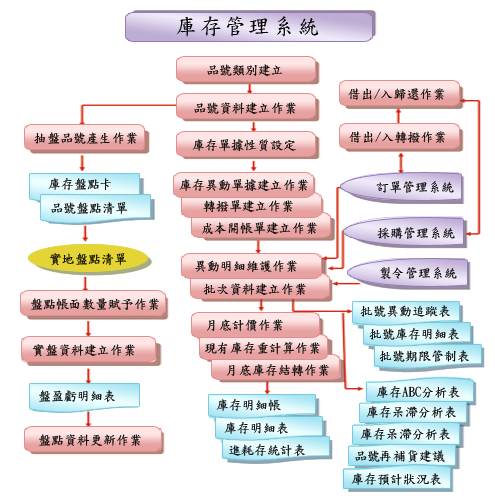
<style>
.page{position:relative;width:495px;height:500px;background:#ffffff}
.page>*{position:absolute;margin:0}
.t1{font:22px "DFKaiShu-SB-Estd-BF";letter-spacing:0.1em;color:#010101}
.t2{font:13px "DFKaiShu-SB-Estd-BF";color:#010101}
</style>
<div class="page">
<p class="t1" style="left:176px;top:16px;width:143px;height:21px">庫存管理系統</p>
<p class="t2" style="left:207px;top:64px;width:76px;height:12px">品號類別建立</p>
<p class="t2" style="left:348px;top:88px;width:97px;height:13px">借出/入歸還作業</p>
<p class="t2" style="left:194px;top:102px;width:102px;height:13px">品號資料建立作業</p>
<p class="t2" style="left:34px;top:132px;width:103px;height:12px">抽盤品號產生作業</p>
<p class="t2" style="left:349px;top:131px;width:97px;height:13px">借出/入轉撥作業</p>
<p class="t2" style="left:192px;top:139px;width:104px;height:13px">庫存單據性質設定</p>
<p class="t2" style="left:48px;top:178px;width:63px;height:12px">庫存盤點卡</p>
<p class="t2" style="left:179px;top:179px;width:129px;height:13px">庫存異動單據建立作業</p>
<p class="t2" style="left:376px;top:181px;width:78px;height:13px">訂單管理系統</p>
<p class="t2" style="left:51px;top:202px;width:77px;height:13px">品號盤點清單</p>
<p class="t2" style="left:203px;top:200px;width:90px;height:13px">轉撥單建立作業</p>
<p class="t2" style="left:202px;top:222px;width:115px;height:13px">成本開帳單建立作業</p>
<p class="t2" style="left:377px;top:227px;width:78px;height:12px">採購管理系統</p>
<p class="t2" style="left:49px;top:253px;width:78px;height:13px">實地盤點清單</p>
<p class="t2" style="left:195px;top:260px;width:102px;height:13px">異動明細維護作業</p>
<p class="t2" style="left:380px;top:267px;width:77px;height:13px">製令管理系統</p>
<p class="t2" style="left:203px;top:283px;width:103px;height:13px">批次資料建立作業</p>
<p class="t2" style="left:31px;top:298px;width:128px;height:12px">盤點帳面數量賦予作業</p>
<p class="t2" style="left:360px;top:305px;width:90px;height:12px">批號異動追蹤表</p>
<p class="t2" style="left:207px;top:319px;width:76px;height:13px">月底計價作業</p>
<p class="t2" style="left:369px;top:328px;width:90px;height:12px">批號庫存明細表</p>
<p class="t2" style="left:205px;top:341px;width:115px;height:14px">現有庫存重計算作業</p>
<p class="t2" style="left:32px;top:344px;width:103px;height:13px">實盤資料建立作業</p>
<p class="t2" style="left:379px;top:350px;width:90px;height:12px">批號期限管制表</p>
<p class="t2" style="left:227px;top:364px;width:102px;height:13px">月底庫存結轉作業</p>
<p class="t2" style="left:39px;top:390px;width:76px;height:12px">盤盈虧明細表</p>
<p class="t2" style="left:376px;top:386px;width:84px;height:12px">庫存ABC分析表</p>
<p class="t2" style="left:216px;top:399px;width:65px;height:12px">庫存明細帳</p>
<p class="t2" style="left:366px;top:406px;width:90px;height:12px">庫存呆滯分析表</p>
<p class="t2" style="left:224px;top:422px;width:64px;height:12px">庫存明細表</p>
<p class="t2" style="left:39px;top:434px;width:102px;height:13px">盤點資料更新作業</p>
<p class="t2" style="left:360px;top:428px;width:90px;height:12px">庫存呆滯分析表</p>
<p class="t2" style="left:229px;top:444px;width:76px;height:13px">進耗存統計表</p>
<p class="t2" style="left:355px;top:450px;width:90px;height:13px">品號再補貨建議</p>
<p class="t2" style="left:351px;top:473px;width:90px;height:13px">庫存預計狀況表</p>
</div>
